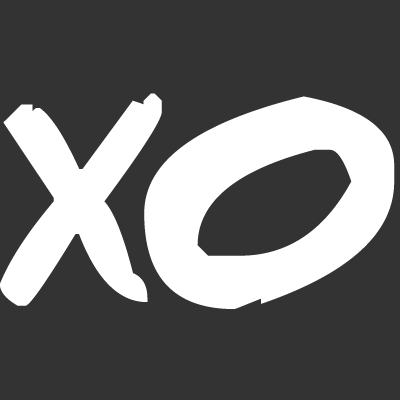
<style>
.page{position:relative;width:400px;height:400px;background:#333333}
.page>*{position:absolute;margin:0}
.t1{font:270px "AdamWarrenpro-Bold";color:#ffffff}
</style>
<div class="page">
<p class="t1" style="left:0px;top:93px;width:395px;height:216px">XO</p>
</div>
